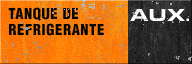
<style>
.page{position:relative;width:192px;height:64px}
.page>*{position:absolute;margin:0}
.t1{font:14.8px/15.8px "HelveticaLT-Condensed-Black";letter-spacing:0.04em;color:#000000}
</style>
<div class="page">
<p class="t1" style="left:8px;top:7px;width:96px;height:29px">TANQUE DE<br>REFRIGERANTE</p>
</div>
